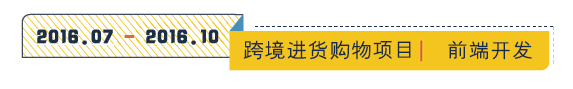
<style>
.page{position:relative;width:573px;height:89px;background:#ffffff}
.page>*{position:absolute;margin:0}
.t1{font:20px "JLinXin";letter-spacing:0.05em;color:#1b2f47;font-weight:bold}
.t2{font:20px "FZYXJW--GB1-0";letter-spacing:0.05em;color:#172c48;font-weight:bold}
</style>
<div class="page">
<p class="t1" style="left:37px;top:29px;width:182px;height:16px">2016.07 2016.10</p>
<p class="t2" style="left:243px;top:40px;width:289px;height:20px">跨境进货购物项目   前端开发</p>
</div>
